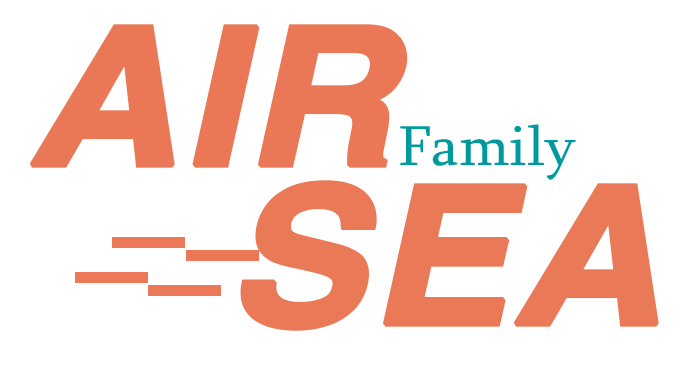
<style>
.page{position:relative;width:694px;height:366px;background:#ffffff}
.page>*{position:absolute;margin:0}
.t1{font:191.7px "SansBOLDITALIC";color:#ea7856;font-weight:bold;scale:1.07 1}
.t2{font:57.5px "Sylfaen";color:#009a9e;scale:1.07 1}
.t3{font:191.7px "SansBOLDITALIC";color:#ea7957;font-weight:bold;scale:1.07 1}
</style>
<div class="page">
<p class="t1" style="left:29px;top:24px;width:379px;height:144px">AIR</p>
<p class="t2" style="left:400px;top:124px;width:176px;height:56px">Family</p>
<p class="t3" style="left:240px;top:180px;width:419px;height:151px">SEA</p>
</div>
